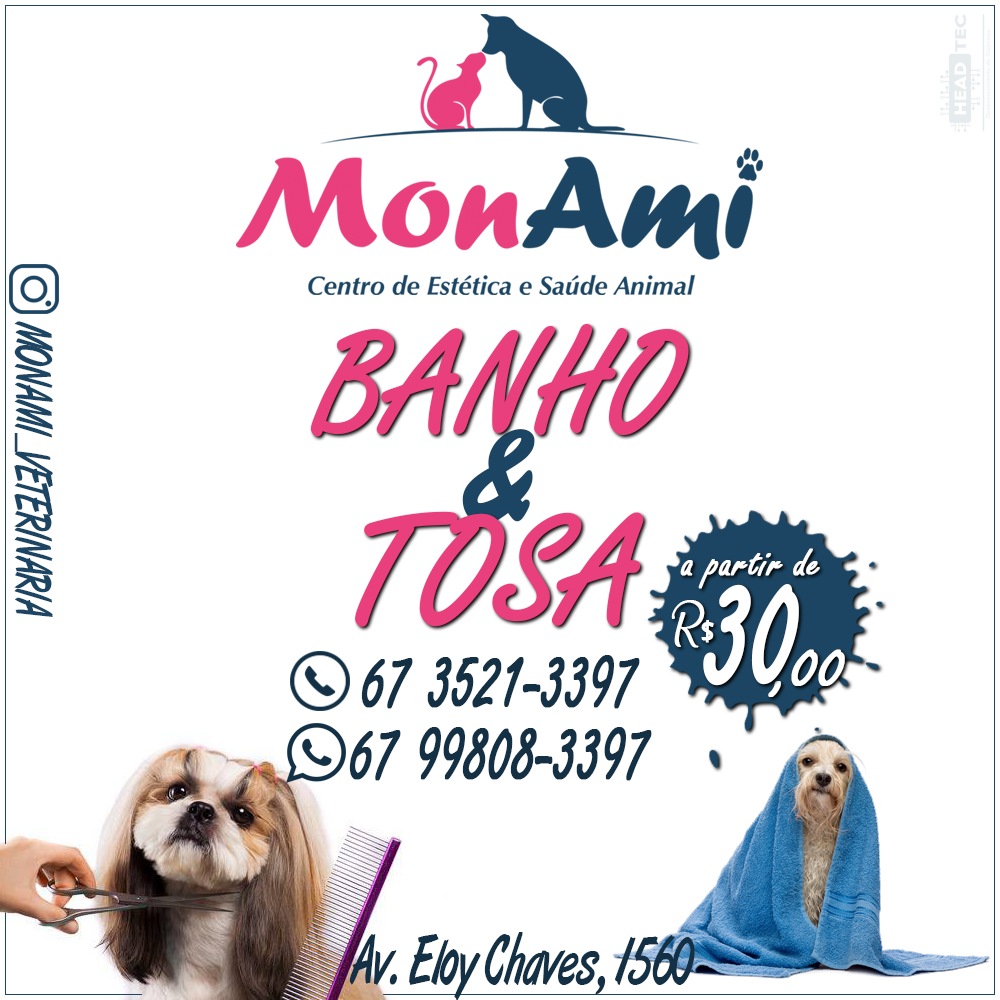
<style>
.page{position:relative;width:1000px;height:1000px;background:#ffffff}
.page>*{position:absolute;margin:0}
.t1{font:50.4px "ArtBrush";color:#1b4563;scale:0.64 1}
.t2{font:150px "FreestyleScript-Regular";color:#e93f7c;font-weight:bold}
.t3{font:140px "BrushScriptMT";color:#1b4563;font-weight:bold}
.t4{font:160px "FreestyleScript-Regular";color:#e93f7c;font-weight:bold}
.t5{font:45px "FreestyleScript-Regular";color:#ffffff;font-weight:bold}
.t6{font:196px "FreestyleScript-Regular";color:#ffffff;font-weight:bold;scale:0.64 1}
.t7{font:30px "Martinesse";color:#ffffff;font-weight:bold}
.t8{font:30px "BerlinSansFB-Reg";color:#ffffff;font-weight:bold}
.t9{font:72px "FreestyleScript-Regular";color:#ffffff;font-weight:bold}
.t10{font:100.8px "FreestyleScript-Regular";color:#133045;font-weight:bold;scale:0.64 1}
.t11{font:67.2px "ArtBrush";color:#133045;scale:0.64 1}
</style>
<div class="page">
<p class="t1" style="left:14px;top:321px;width:39px;height:296px;rotate:90deg">MONAMI_VETERINARIA</p>
<p class="t2" style="left:310px;top:323px;width:379px;height:114px">BANHO</p>
<p class="t3" style="left:462px;top:429px;width:73px;height:96px">&amp;</p>
<p class="t4" style="left:355px;top:511px;width:289px;height:116px">TOSA</p>
<p class="t5" style="left:680px;top:548px;width:140px;height:41px">a partir de</p>
<p class="t6" style="left:703px;top:584px;width:96px;height:102px">30</p>
<p class="t7" style="left:671px;top:600px;width:43px;height:48px">R<span class="t8">$</span></p>
<p class="t9" style="left:768px;top:649px;width:77px;height:48px">,00</p>
<p class="t10" style="left:361px;top:655px;width:279px;height:54px">67 3521-3397</p>
<p class="t10" style="left:349px;top:727px;width:303px;height:54px">67 99808-3397</p>
<p class="t11" style="left:349px;top:932px;width:346px;height:69px">Av. Eloy Chaves, 1560</p>
</div>
